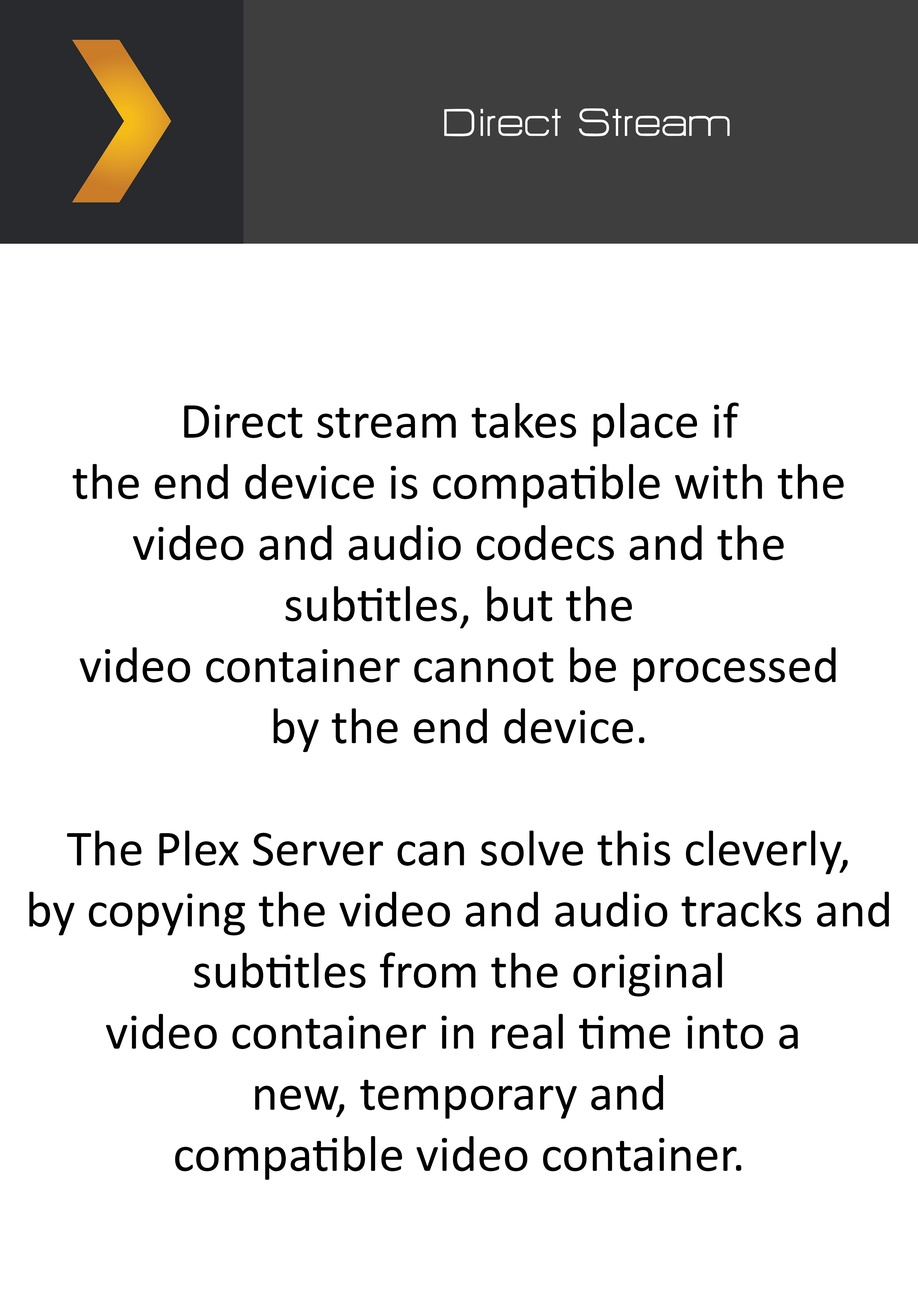
<style>
.page{position:relative;width:918px;height:1299px;background:#ffffff}
.page>*{position:absolute;margin:0}
.t1{font:47.8px "HURTMOLDPersonalUse-Regular";color:#ffffff}
.t2{font:50.9px "Calibri";color:#000000}
</style>
<div class="page">
<p class="t1" style="left:444px;top:108px;width:286px;height:28px">Direct Stream</p>
<p class="t2" style="left:29px;top:402px;width:860px;height:778px;text-align:center">Direct stream takes place if<br>the end device is compatible with the<br>video and audio codecs and the<br>subtitles, but the<br>video container cannot be processed<br>by the end device.<br><br>The Plex Server can solve this cleverly,<br>by copying the video and audio tracks and<br>subtitles from the original<br>video container in real time into a <br>new, temporary and<br>compatible video container.</p>
</div>
